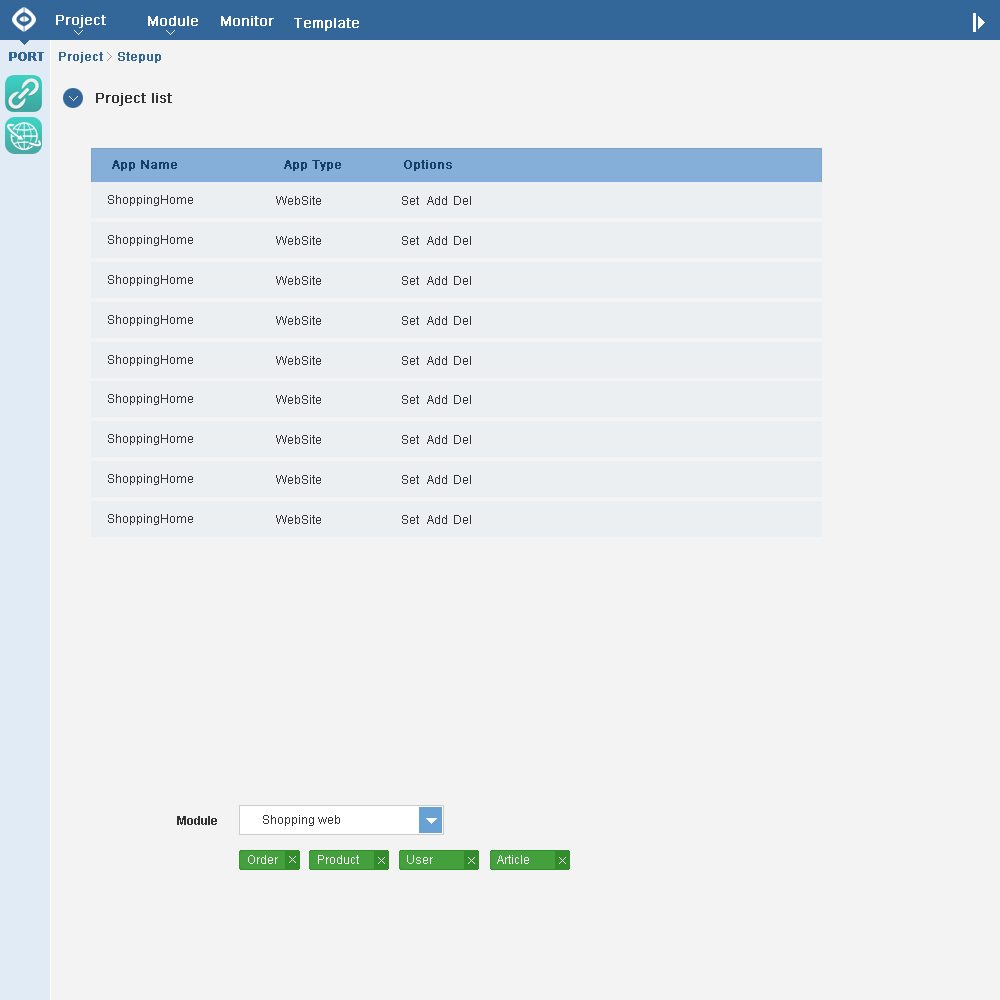
<style>
.page{position:relative;width:1000px;height:1000px;background:#f3f3f3}
.page>*{position:absolute;margin:0}
.t1{font:14px "ArialMT";color:#ffffff;font-weight:bold}
.t2{font:12px "Arial-BoldMT";color:#336699;font-weight:bold}
.t3{font:12px "ArialMT";color:#336699;font-weight:bold}
.t4{font:14px "ArialMT";color:#333333;font-weight:bold}
.t5{font:12px "ArialMT";color:#183f66;font-weight:bold}
.t6{font:12px "ArialMT";color:#333333}
.t7{font:12px "Arial-BoldMT";color:#333333}
.t8{font:12px "ArialMT";color:#ffffff}
</style>
<div class="page">
<p class="t1" style="left:56px;top:15px;width:50px;height:13px">Project</p>
<p class="t1" style="left:148px;top:16px;width:50px;height:10px">Module</p>
<p class="t1" style="left:221px;top:16px;width:53px;height:10px">Monitor</p>
<p class="t1" style="left:294px;top:18px;width:65px;height:13px">Template</p>
<p class="t2" style="left:9px;top:52px;width:35px;height:9px">PORT</p>
<p class="t3" style="left:59px;top:52px;width:44px;height:11px">Project</p>
<p class="t3" style="left:118px;top:52px;width:43px;height:11px">Stepup</p>
<p class="t4" style="left:96px;top:93px;width:76px;height:13px">Project list</p>
<p class="t5" style="left:112px;top:160px;width:65px;height:11px">App Name</p>
<p class="t5" style="left:284px;top:160px;width:57px;height:11px">App Type</p>
<p class="t5" style="left:404px;top:160px;width:48px;height:11px">Options</p>
<p class="t6" style="left:108px;top:195px;width:85px;height:11px">ShoppingHome</p>
<p class="t6" style="left:276px;top:196px;width:45px;height:9px">WebSite</p>
<p class="t6" style="left:402px;top:196px;width:17px;height:9px">Set</p>
<p class="t6" style="left:427px;top:196px;width:20px;height:9px">Add</p>
<p class="t6" style="left:454px;top:196px;width:17px;height:9px">Del</p>
<p class="t7" style="left:177px;top:816px;width:40px;height:9px">Module</p>
<p class="t6" style="left:263px;top:815px;width:77px;height:11px">Shopping web</p>
<p class="t8" style="left:248px;top:855px;width:30px;height:9px">Order</p>
<p class="t8" style="left:318px;top:855px;width:41px;height:9px">Product</p>
<p class="t8" style="left:407px;top:855px;width:26px;height:9px">User</p>
<p class="t8" style="left:497px;top:855px;width:32px;height:9px">Article</p>
</div>
